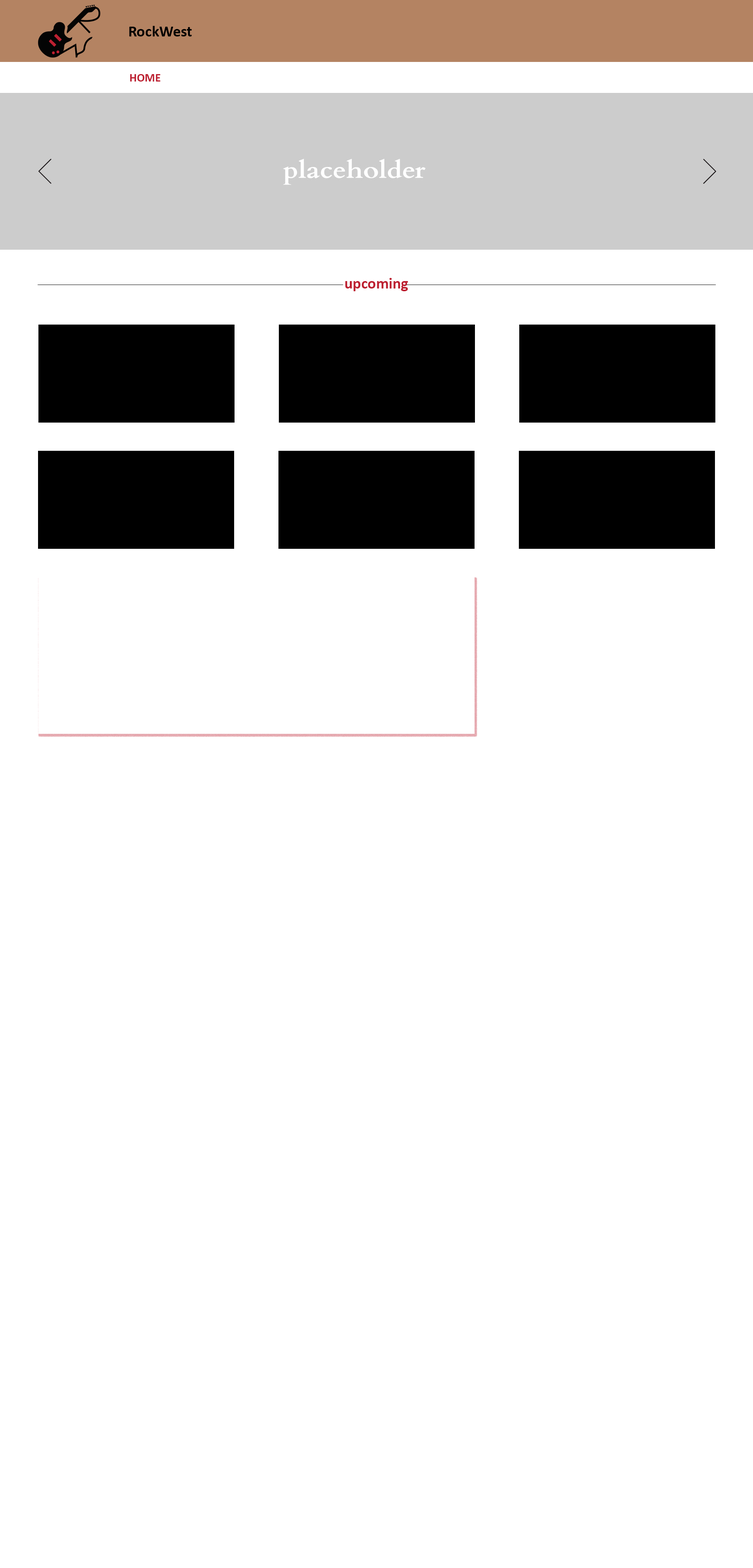
<style>
.page{position:relative;width:753px;height:1568px;background:#ffffff}
.page>*{position:absolute;margin:0}
.t1{font:15.7px "Calibri-Bold";color:#000000}
.t2{font:11.8px "Calibri-Bold";color:#bd2031}
.t3{font:15.7px "Calibri-Bold";color:#bd2031}
</style>
<div class="page">
<p class="t1" style="left:129px;top:26px;width:63px;height:10px">RockWest</p>
<p class="t2" style="left:130px;top:74px;width:30px;height:8px">HOME</p>
<p class="t3" style="left:345px;top:278px;width:63px;height:13px">upcoming</p>
</div>
